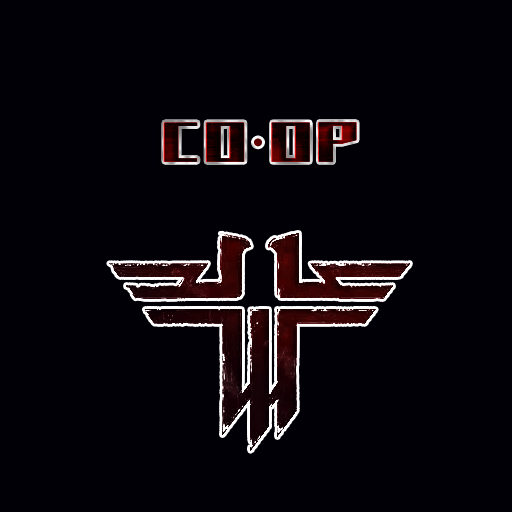
<style>
.page{position:relative;width:512px;height:512px;background:#010006}
.page>*{position:absolute;margin:0}
.t1{font:71.9px "Wolfenstein-Bold";color:#190000;scale:1.3 1}
.t2{font:71.9px "BookAntiqua";color:#5a0000;scale:1.05 1}
</style>
<div class="page">
<p class="t1" style="left:164px;top:122px;width:193px;height:40px">CO OP</p>
<p class="t2" style="left:254px;top:138px;width:8px;height:9px">˙</p>
</div>
